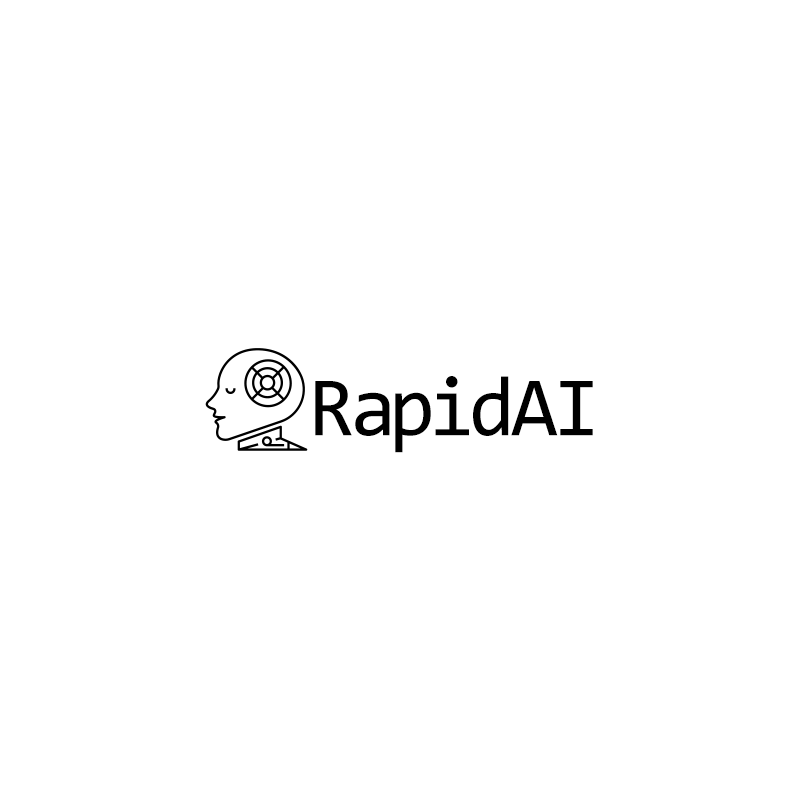
<style>
.page{position:relative;width:800px;height:800px;background:#ffffff}
.page>*{position:absolute;margin:0}
.t1{font:85px "Consolas";color:#000000}
</style>
<div class="page">
<p class="t1" style="left:315px;top:376px;width:278px;height:77px">RapidAI</p>
</div>
